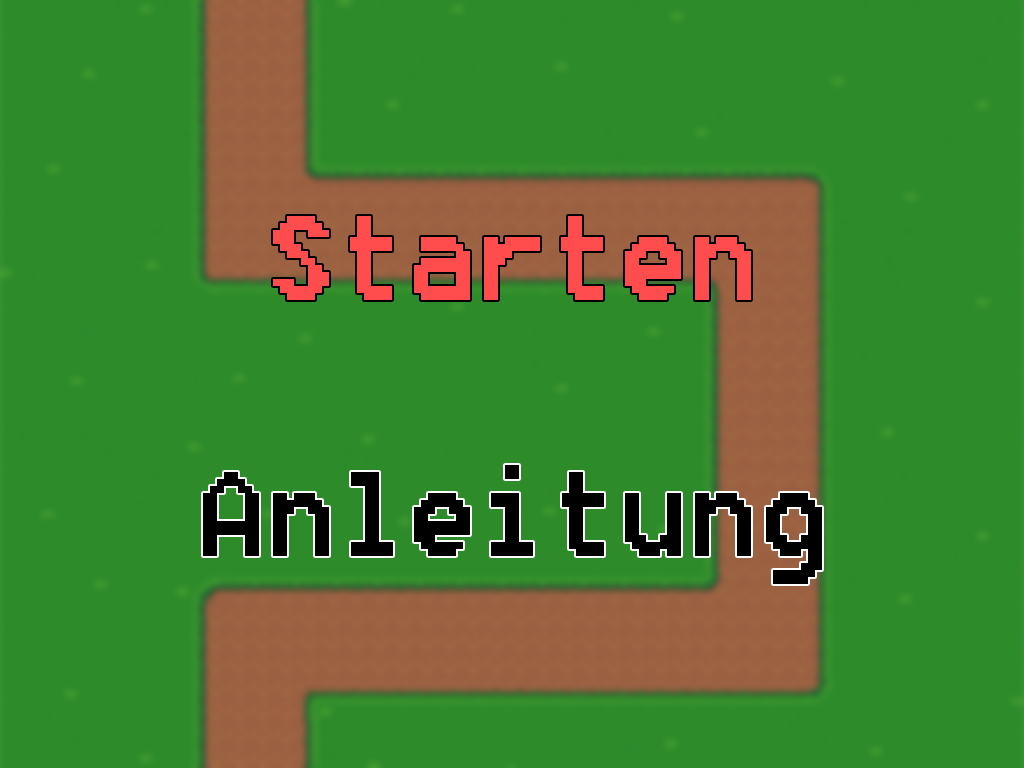
<style>
.page{position:relative;width:1024px;height:768px;background:#2e8b2a}
.page>*{position:absolute;margin:0}
.t1{font:150px "8514oem";color:#ff4d4d}
.t2{font:150px "8514oem";color:#000000}
</style>
<div class="page">
<p class="t1" style="left:273px;top:216px;width:478px;height:84px">Starten</p>
<p class="t2" style="left:203px;top:465px;width:619px;height:119px">Anleitung</p>
</div>
